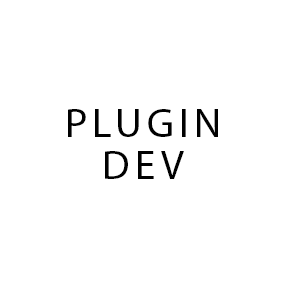
<style>
.page{position:relative;width:300px;height:300px;background:#ffffff}
.page>*{position:absolute;margin:0}
.t1{font:41.4px/41.4px "MyriadPro-Regular";letter-spacing:0.1em;color:#010101;text-transform:uppercase}
</style>
<div class="page">
<p class="t1" style="left:68px;top:109px;width:150px;height:70px;text-align:center">Plugin<br>Dev</p>
</div>
